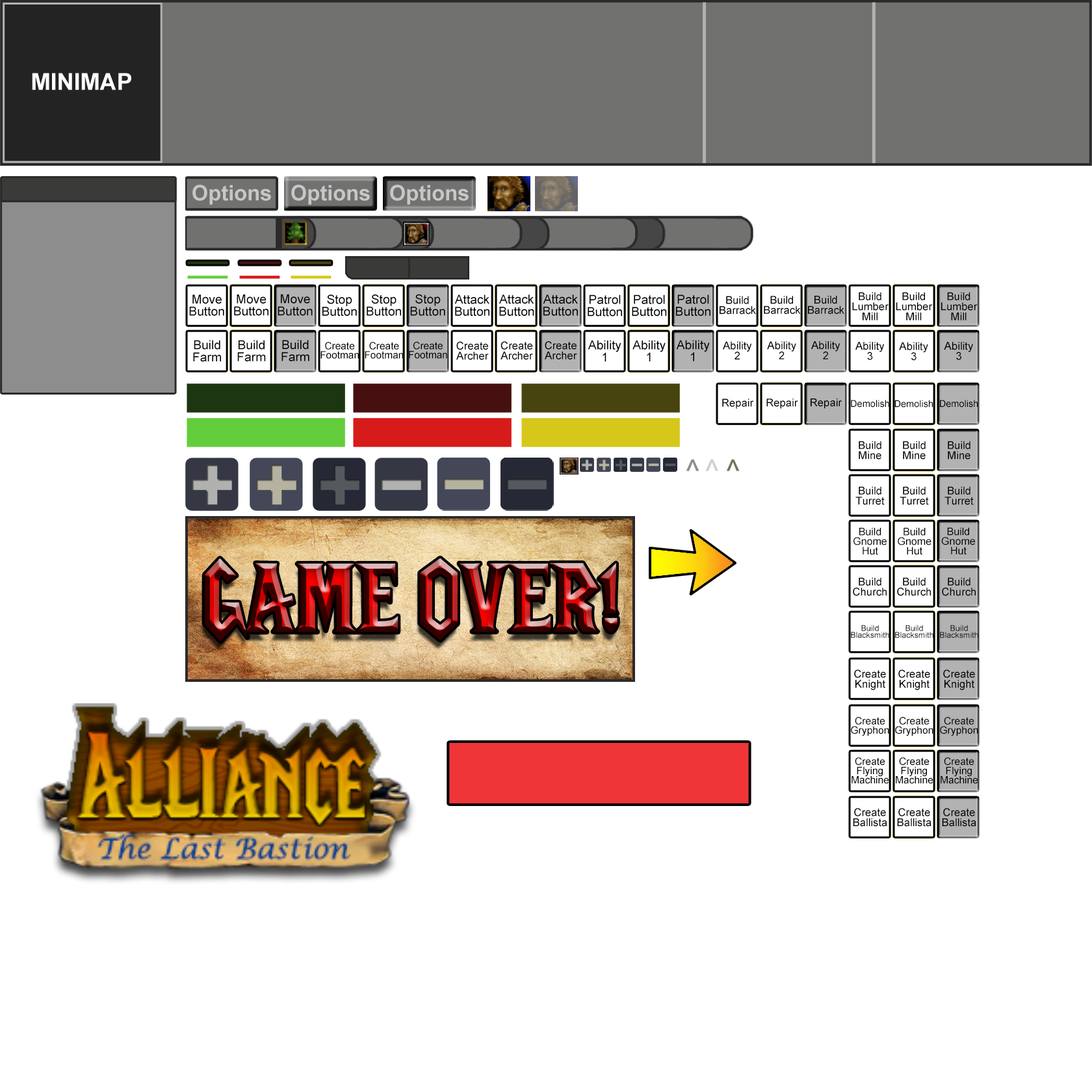
<style>
.page{position:relative;width:1092px;height:1092px;background:#ffffff}
.page>*{position:absolute;margin:0}
.t1{font:12.5px "ArialMT";color:#000000}
.t2{font:10.8px "ArialMT";color:#000000}
.t3{font:10px "ArialMT";color:#000000}
.t4{font:9.5px "ArialMT";color:#000000}
.t5{font:29.8px "ArialMT";color:#8d8d8d}
.t6{font:29.8px "ArialMT";color:#cfcfcf}
.t7{font:29.8px "ArialMT";color:#747661}
.t8{font:10.4px "ArialMT";color:#000000}
.t9{font:8.1px "ArialMT";color:#000000}
.t10{font:10.2px "ArialMT";color:#000000}
</style>
<div class="page">
<p class="t1" style="left:278px;top:294px;width:35px;height:22px;text-align:center">Move<br>Button</p>
<p class="t1" style="left:410px;top:294px;width:35px;height:22px;text-align:center">Stop<br>Button</p>
<p class="t2" style="left:852px;top:292px;width:37px;height:28px;text-align:center">Build<br>Lumber<br>Mill</p>
<p class="t2" style="left:896px;top:292px;width:37px;height:28px;text-align:center">Build<br>Lumber<br>Mill</p>
<p class="t2" style="left:941px;top:292px;width:37px;height:28px;text-align:center">Build<br>Lumber<br>Mill</p>
<p class="t1" style="left:189px;top:294px;width:35px;height:22px;text-align:center">Move<br>Button</p>
<p class="t1" style="left:234px;top:294px;width:34px;height:22px;text-align:center">Move<br>Button</p>
<p class="t1" style="left:322px;top:294px;width:35px;height:22px;text-align:center">Stop<br>Button</p>
<p class="t1" style="left:367px;top:294px;width:34px;height:22px;text-align:center">Stop<br>Button</p>
<p class="t1" style="left:454px;top:294px;width:35px;height:22px;text-align:center">Attack<br>Button</p>
<p class="t1" style="left:499px;top:294px;width:35px;height:22px;text-align:center">Attack<br>Button</p>
<p class="t1" style="left:543px;top:294px;width:35px;height:22px;text-align:center">Attack<br>Button</p>
<p class="t1" style="left:588px;top:294px;width:34px;height:23px;text-align:center">Patrol<br>Button</p>
<p class="t1" style="left:632px;top:294px;width:35px;height:23px;text-align:center">Patrol<br>Button</p>
<p class="t1" style="left:676px;top:294px;width:34px;height:22px;text-align:center">Patrol<br>Button</p>
<p class="t2" style="left:720px;top:296px;width:36px;height:19px;text-align:center">Build<br>Barrack</p>
<p class="t2" style="left:764px;top:296px;width:37px;height:18px;text-align:center">Build<br>Barrack</p>
<p class="t2" style="left:808px;top:296px;width:36px;height:18px;text-align:center">Build<br>Barrack</p>
<p class="t1" style="left:193px;top:340px;width:28px;height:22px;text-align:center">Build<br>Farm</p>
<p class="t1" style="left:237px;top:340px;width:29px;height:21px;text-align:center">Build<br>Farm</p>
<p class="t1" style="left:281px;top:340px;width:28px;height:21px;text-align:center">Build<br>Farm</p>
<p class="t3" style="left:320px;top:342px;width:39px;height:17px;text-align:center">Create<br>Footman</p>
<p class="t3" style="left:365px;top:342px;width:39px;height:17px;text-align:center">Create<br>Footman</p>
<p class="t3" style="left:409px;top:341px;width:38px;height:18px;text-align:center">Create<br>Footman</p>
<p class="t2" style="left:456px;top:341px;width:33px;height:19px;text-align:center">Create<br>Archer</p>
<p class="t2" style="left:500px;top:341px;width:33px;height:19px;text-align:center">Create<br>Archer</p>
<p class="t2" style="left:545px;top:341px;width:32px;height:18px;text-align:center">Create<br>Archer</p>
<p class="t1" style="left:588px;top:340px;width:33px;height:22px;text-align:center">Ability<br>1</p>
<p class="t1" style="left:632px;top:340px;width:34px;height:21px;text-align:center">Ability<br>1</p>
<p class="t1" style="left:676px;top:340px;width:34px;height:21px;text-align:center">Ability<br>1</p>
<p class="t2" style="left:723px;top:341px;width:29px;height:18px;text-align:center">Ability<br>2</p>
<p class="t2" style="left:767px;top:341px;width:29px;height:18px;text-align:center">Ability<br>2</p>
<p class="t2" style="left:811px;top:341px;width:29px;height:18px;text-align:center">Ability<br>2</p>
<p class="t2" style="left:855px;top:342px;width:30px;height:18px;text-align:center">Ability<br>3</p>
<p class="t2" style="left:899px;top:342px;width:29px;height:19px;text-align:center">Ability<br>3</p>
<p class="t2" style="left:944px;top:342px;width:29px;height:18px;text-align:center">Ability<br>3</p>
<p class="t2" style="left:722px;top:398px;width:32px;height:11px">Repair</p>
<p class="t2" style="left:766px;top:398px;width:32px;height:11px">Repair</p>
<p class="t2" style="left:811px;top:398px;width:31px;height:11px">Repair</p>
<p class="t4" style="left:851px;top:400px;width:38px;height:8px">Demolish</p>
<p class="t4" style="left:894px;top:400px;width:39px;height:8px">Demolish</p>
<p class="t4" style="left:940px;top:400px;width:38px;height:8px">Demolish</p>
<p class="t2" style="left:859px;top:441px;width:22px;height:19px;text-align:center">Build<br>Mine</p>
<p class="t2" style="left:903px;top:441px;width:23px;height:19px;text-align:center">Build<br>Mine</p>
<p class="t2" style="left:948px;top:441px;width:22px;height:19px;text-align:center">Build<br>Mine</p>
<p class="t5" style="left:686px;top:459px;width:13px;height:12px">^</p>
<p class="t6" style="left:705px;top:459px;width:13px;height:12px">^</p>
<p class="t7" style="left:727px;top:459px;width:13px;height:12px">^</p>
<p class="t2" style="left:855px;top:486px;width:30px;height:19px;text-align:center">Build<br>Turret</p>
<p class="t2" style="left:900px;top:486px;width:29px;height:19px;text-align:center">Build<br>Turret</p>
<p class="t2" style="left:944px;top:486px;width:30px;height:19px;text-align:center">Build<br>Turret</p>
<p class="t8" style="left:853px;top:528px;width:34px;height:27px;text-align:center">Build<br>Gnome<br>Hut</p>
<p class="t8" style="left:898px;top:528px;width:33px;height:27px;text-align:center">Build<br>Gnome<br>Hut</p>
<p class="t8" style="left:941px;top:527px;width:34px;height:27px;text-align:center">Build<br>Gnome<br>Hut</p>
<p class="t2" style="left:853px;top:577px;width:34px;height:19px;text-align:center">Build<br>Church</p>
<p class="t2" style="left:897px;top:577px;width:34px;height:19px;text-align:center">Build<br>Church</p>
<p class="t2" style="left:942px;top:577px;width:34px;height:19px;text-align:center">Build<br>Church</p>
<p class="t9" style="left:851px;top:625px;width:38px;height:13px;text-align:center">Build<br>Blacksmith</p>
<p class="t9" style="left:895px;top:625px;width:38px;height:13px;text-align:center">Build<br>Blacksmith</p>
<p class="t9" style="left:940px;top:625px;width:38px;height:13px;text-align:center">Build<br>Blacksmith</p>
<p class="t2" style="left:854px;top:669px;width:32px;height:21px;text-align:center">Create<br>Knight</p>
<p class="t2" style="left:898px;top:669px;width:32px;height:21px;text-align:center">Create<br>Knight</p>
<p class="t2" style="left:943px;top:669px;width:32px;height:21px;text-align:center">Create<br>Knight</p>
<p class="t10" style="left:851px;top:717px;width:38px;height:19px;text-align:center">Create<br>Gryphon</p>
<p class="t10" style="left:895px;top:717px;width:38px;height:19px;text-align:center">Create<br>Gryphon</p>
<p class="t10" style="left:940px;top:717px;width:38px;height:19px;text-align:center">Create<br>Gryphon</p>
<p class="t10" style="left:851px;top:757px;width:38px;height:27px;text-align:center">Create<br>Flying<br>Machine</p>
<p class="t10" style="left:896px;top:757px;width:37px;height:27px;text-align:center">Create<br>Flying<br>Machine</p>
<p class="t10" style="left:941px;top:757px;width:37px;height:27px;text-align:center">Create<br>Flying<br>Machine</p>
<p class="t2" style="left:853px;top:808px;width:34px;height:19px;text-align:center">Create<br>Ballista</p>
<p class="t2" style="left:897px;top:808px;width:34px;height:19px;text-align:center">Create<br>Ballista</p>
<p class="t2" style="left:942px;top:808px;width:34px;height:19px;text-align:center">Create<br>Ballista</p>
</div>
